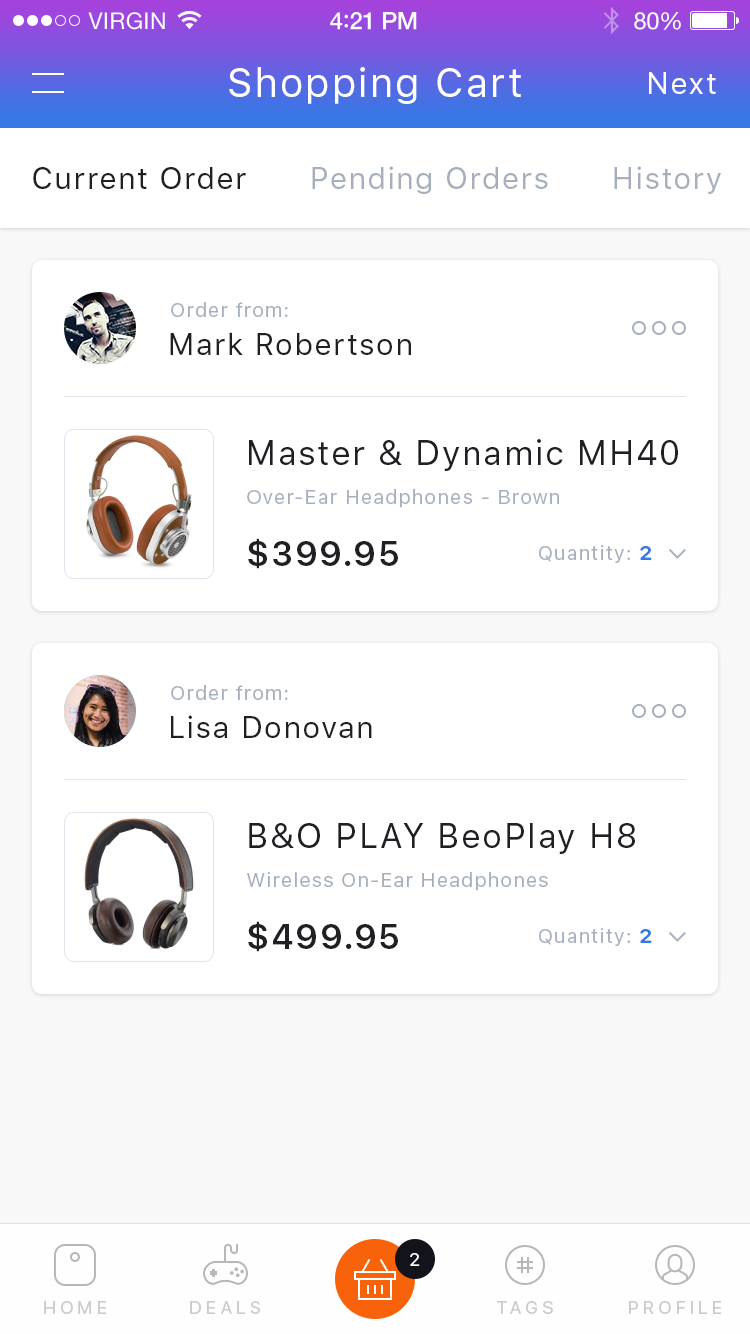
<style>
.page{position:relative;width:750px;height:1334px;background:#ffffff}
.page>*{position:absolute;margin:0}
.t1{font:40px "SFUIText-Regular";letter-spacing:0.05em;color:#ffffff}
.t2{font:30px "SFUIText-Regular";letter-spacing:0.05em;color:#ffffff}
.t3{font:30px "SFUIText-Regular";letter-spacing:0.05em;color:#1e2024}
.t4{font:30px "SFUIText-Regular";letter-spacing:0.05em;color:#a6b0bd}
.t5{font:20px "SFUIText-Regular";letter-spacing:0.05em;color:#a6b0bd}
.t6{font:34px "SFUIText-Regular";letter-spacing:0.05em;color:#1e2024}
.t7{font:34px "SFUIText-Semibold";letter-spacing:0.05em;color:#1e2024}
.t8{font:20px "SFUIText-Bold";letter-spacing:0.05em;color:#327ae5}
.t9{font:18px "SFUIText-Regular";color:#ffffff;text-transform:uppercase}
.t10{font:18px "SFUIText-Regular";letter-spacing:0.2em;color:#cbcbcc;text-transform:uppercase}
</style>
<div class="page">
<p class="t1" style="left:229px;top:67px;width:292px;height:37px">Shopping Cart</p>
<p class="t2" style="left:649px;top:72px;width:67px;height:22px">Next</p>
<p class="t3" style="left:33px;top:167px;width:213px;height:22px">Current Order</p>
<p class="t4" style="left:312px;top:166px;width:236px;height:28px">Pending Orders</p>
<p class="t4" style="left:614px;top:166px;width:107px;height:28px">History</p>
<p class="t5" style="left:171px;top:302px;width:117px;height:15px">Order from:</p>
<p class="t3" style="left:170px;top:332px;width:241px;height:23px">Mark Robertson</p>
<p class="t6" style="left:249px;top:439px;width:429px;height:32px">Master &amp; Dynamic MH40</p>
<p class="t5" style="left:247px;top:489px;width:312px;height:19px">Over-Ear Headphones - Brown</p>
<p class="t7" style="left:248px;top:538px;width:150px;height:31px">$399.95</p>
<p class="t5" style="left:539px;top:545px;width:113px;height:18px">Quantity: <span class="t8">2</span></p>
<p class="t5" style="left:171px;top:685px;width:117px;height:15px">Order from:</p>
<p class="t3" style="left:171px;top:715px;width:201px;height:23px">Lisa Donovan</p>
<p class="t6" style="left:249px;top:823px;width:386px;height:31px">B&amp;O PLAY BeoPlay H8</p>
<p class="t5" style="left:247px;top:872px;width:301px;height:19px">Wireless On-Ear Headphones</p>
<p class="t7" style="left:248px;top:921px;width:150px;height:31px">$499.95</p>
<p class="t5" style="left:539px;top:928px;width:113px;height:18px">Quantity: <span class="t8">2</span></p>
<p class="t9" style="left:410px;top:1253px;width:10px;height:13px">2</p>
<p class="t10" style="left:44px;top:1301px;width:63px;height:13px">home</p>
<p class="t10" style="left:190px;top:1301px;width:70px;height:13px">deals</p>
<p class="t10" style="left:496px;top:1301px;width:57px;height:13px">tags</p>
<p class="t10" style="left:629px;top:1301px;width:93px;height:13px">profile</p>
</div>
